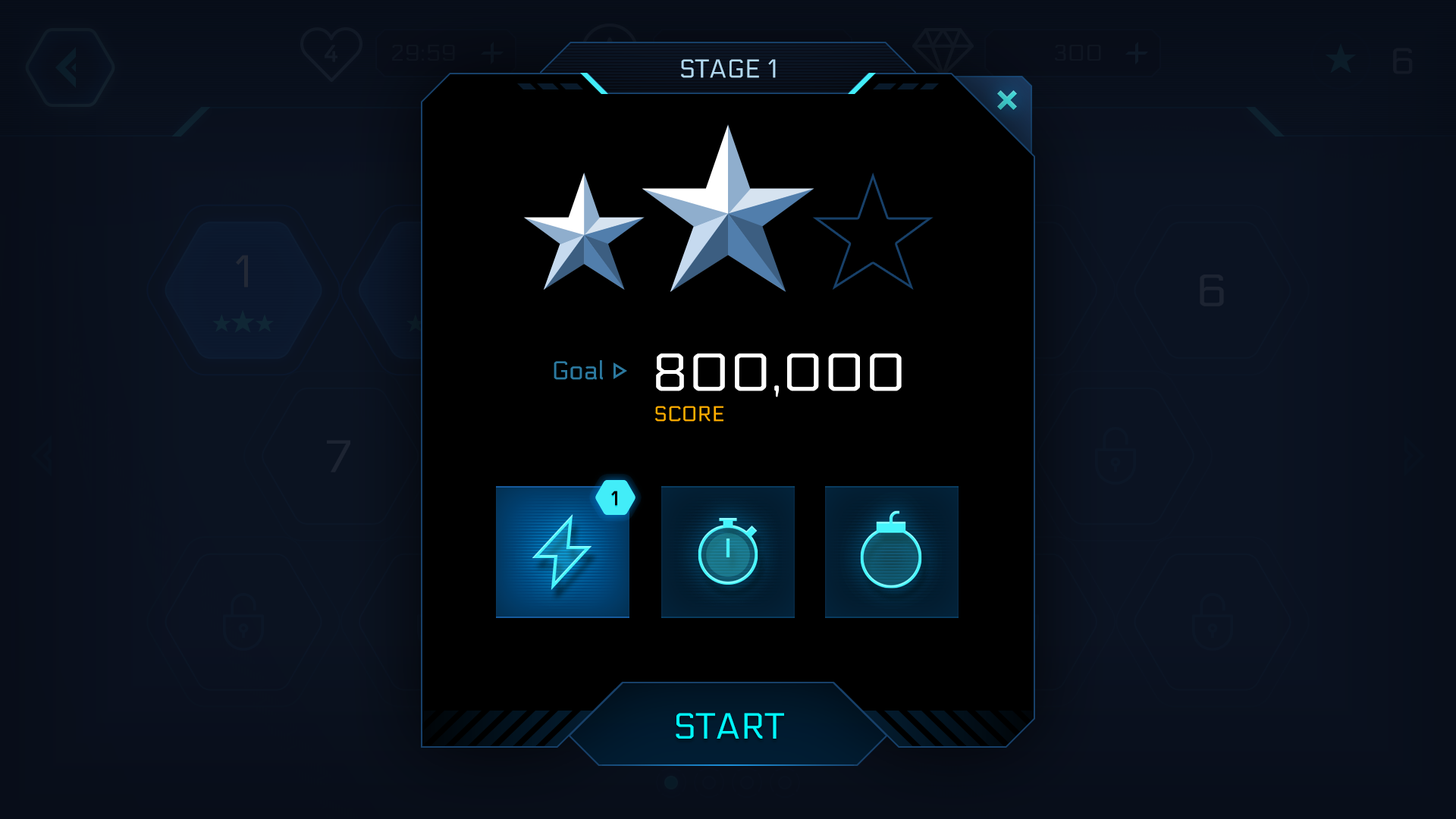
<style>
.page{position:relative;width:1456px;height:819px;background:#000000}
.page>*{position:absolute;margin:0}
.t1{font:25.8px "Electrolize-Regular";color:#b1d8f1;text-transform:uppercase}
.t2{font:53.1px "Electrolize-Regular";color:#ffffff}
.t3{font:25.8px "Electrolize-Regular";color:#2c799f}
.t4{font:21.2px "Electrolize-Regular";color:#ffae00;text-transform:uppercase}
.t5{font:19.7px "Electrolize-Regular";color:#000000;text-transform:uppercase;font-weight:bold}
.t6{font:36.4px "Electrolize-Regular";color:#00f7ff;text-transform:uppercase}
</style>
<div class="page">
<p class="t1" style="left:681px;top:59px;width:95px;height:19px">Stage 1</p>
<p class="t2" style="left:656px;top:353px;width:246px;height:44px">800,000</p>
<p class="t3" style="left:554px;top:360px;width:49px;height:20px">Goal</p>
<p class="t4" style="left:655px;top:406px;width:68px;height:16px">score</p>
<p class="t5" style="left:611px;top:491px;width:6px;height:15px">1</p>
<p class="t6" style="left:676px;top:713px;width:108px;height:26px">START</p>
</div>
